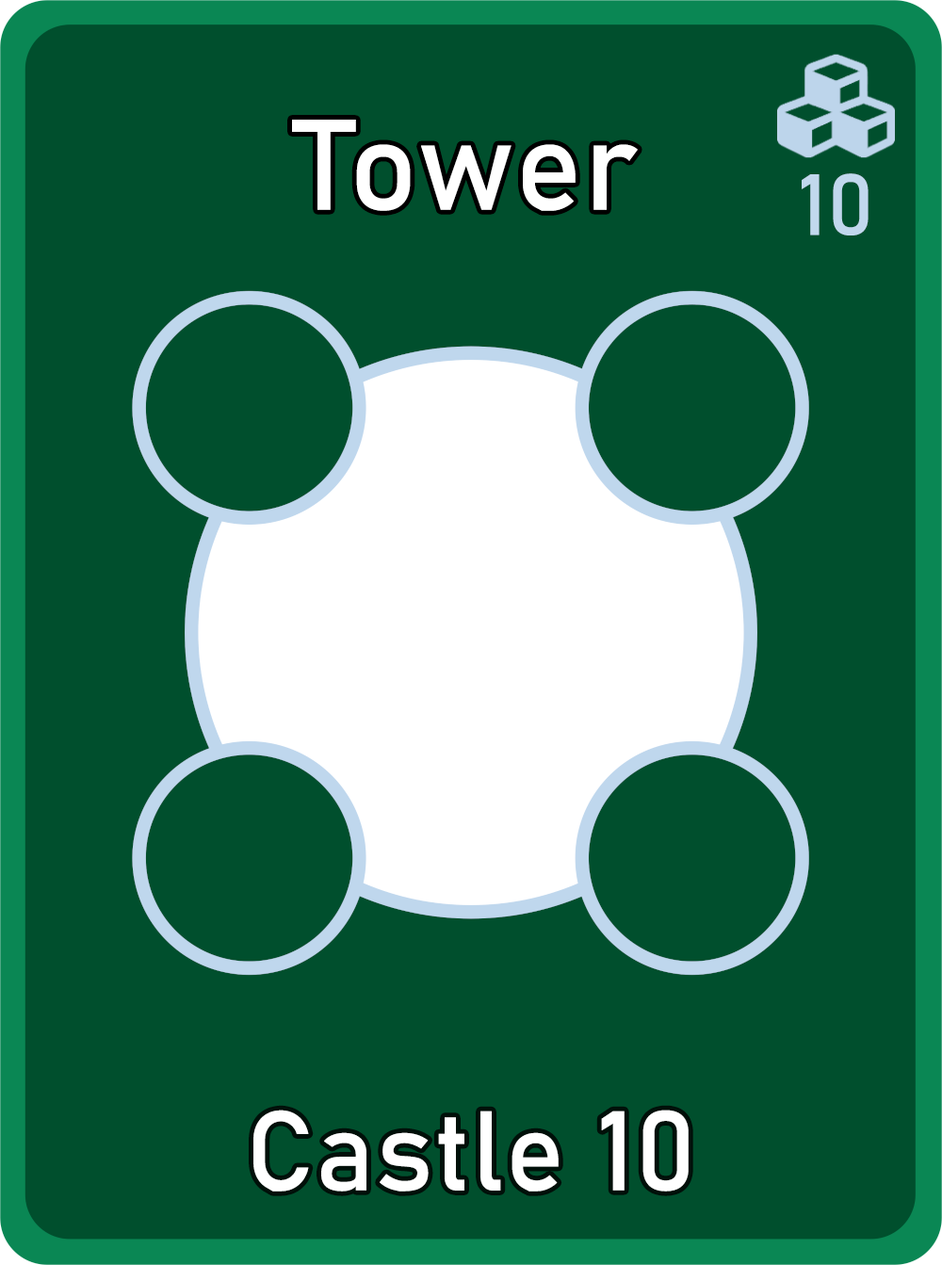
<style>
.page{position:relative;width:942px;height:1265px;background:#004f2d}
.page>*{position:absolute;margin:0}
.t1{font:126.7px "Bahnschrift";letter-spacing:0.01em;color:#ffffff}
.t2{font:85px "Bahnschrift";letter-spacing:0.01em;color:#c1d8ed}
.t3{font:111.3px "Bahnschrift";letter-spacing:0.01em;color:#ffffff}
</style>
<div class="page">
<p class="t1" style="left:292px;top:120px;width:346px;height:91px">Tower</p>
<p class="t2" style="left:802px;top:173px;width:67px;height:63px">10</p>
<p class="t3" style="left:253px;top:1110px;width:436px;height:82px">Castle 10</p>
</div>
